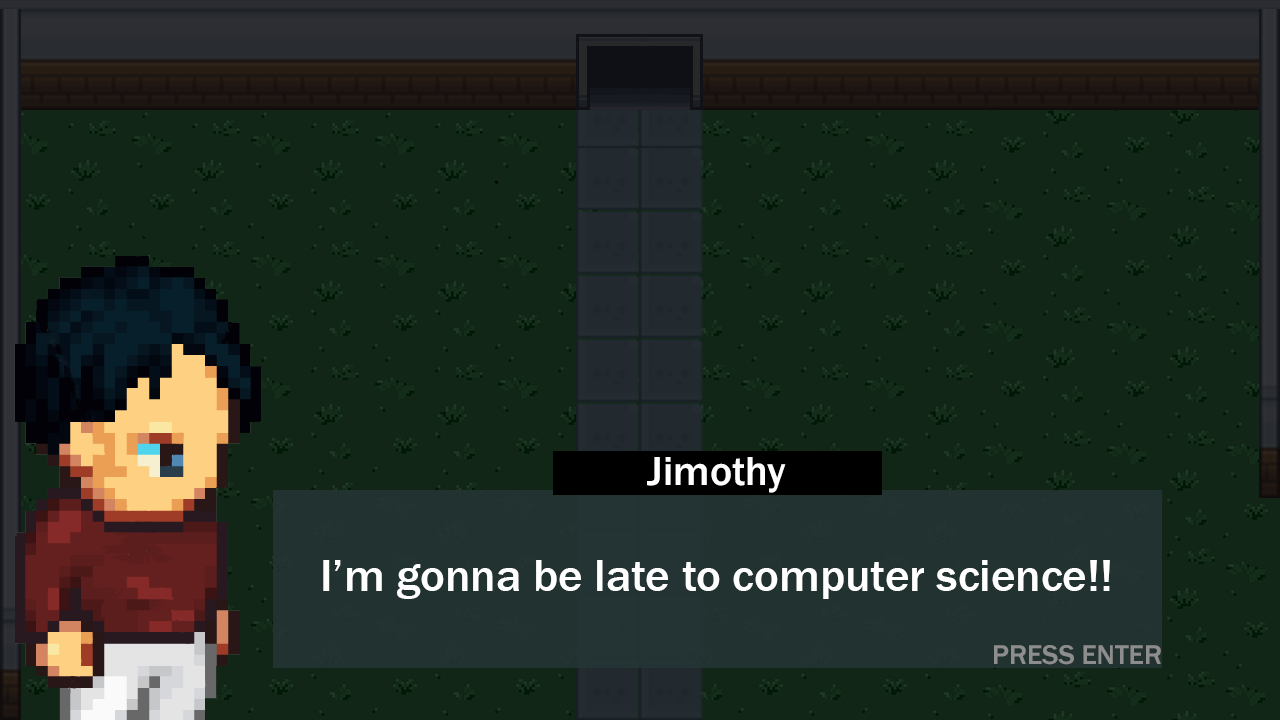
<style>
.page{position:relative;width:1280px;height:720px;background:#112616}
.page>*{position:absolute;margin:0}
.t1{font:42.1px "FranklinGothic-Medium";color:#ffffff}
.t2{font:46.5px "FranklinGothic-Medium";color:#ffffff}
.t3{font:28.1px "FranklinGothic-Medium";color:#8d8d8d}
</style>
<div class="page">
<p class="t1" style="left:647px;top:457px;width:139px;height:36px">Jimothy</p>
<p class="t2" style="left:323px;top:560px;width:787px;height:39px">I’m gonna be late to computer science!!</p>
<p class="t3" style="left:994px;top:645px;width:167px;height:20px">PRESS ENTER</p>
</div>
